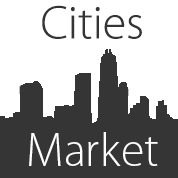
<style>
.page{position:relative;width:178px;height:178px;background:#ffffff}
.page>*{position:absolute;margin:0}
.t1{font:47.5px "MyriadPro-Light";color:#343434}
.t2{font:47.5px "MyriadPro-Light";color:#ffffff}
</style>
<div class="page">
<p class="t1" style="left:42px;top:5px;width:100px;height:34px">Сities</p>
<p class="t2" style="left:29px;top:132px;width:129px;height:34px">Market</p>
</div>
